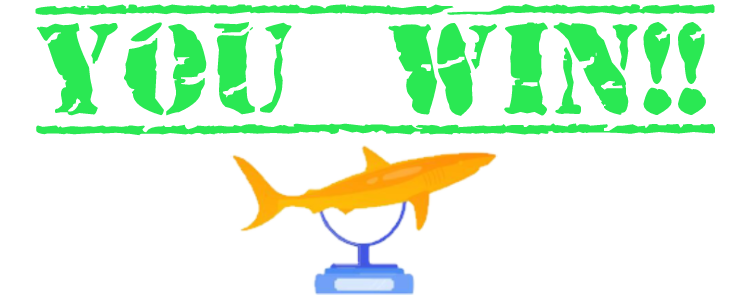
<style>
.page{position:relative;width:750px;height:300px;background:#ffffff}
.page>*{position:absolute;margin:0}
.t1{font:131px "OldStamper";color:#2ae853}
</style>
<div class="page">
<p class="t1" style="left:35px;top:4px;width:680px;height:132px">YOU WIN!!</p>
</div>
